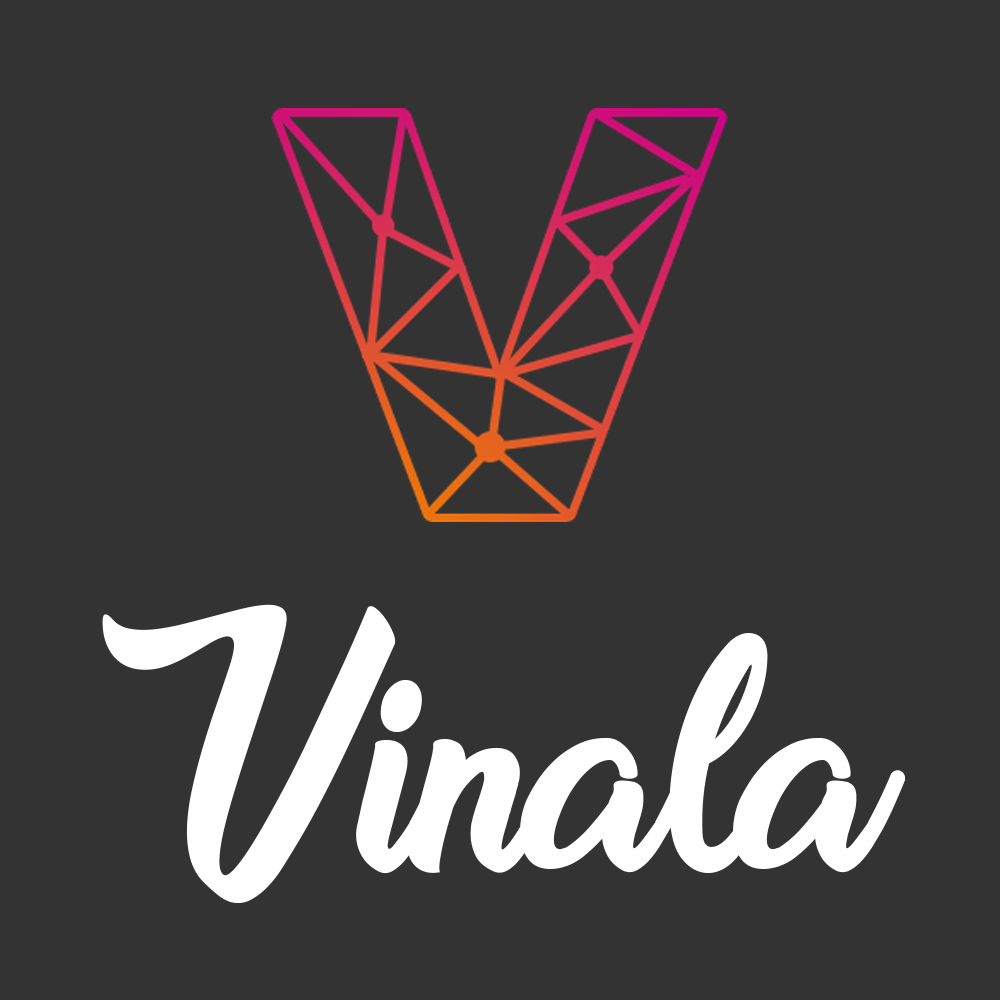
<style>
.page{position:relative;width:1000px;height:1000px;background:#333333}
.page>*{position:absolute;margin:0}
.t1{font:366.7px "SweetSensationsPersonalUse";color:#ffffff}
</style>
<div class="page">
<p class="t1" style="left:102px;top:604px;width:803px;height:299px">Vinala</p>
</div>
